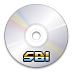
<style>
.page{position:relative;width:72px;height:72px;background:#ffffff}
.page>*{position:absolute;margin:0}
.t1{font:14px "Uranium"}
</style>
<div class="page">
<p class="t1" style="left:24px;top:52px;width:25px;height:9px">SBI</p>
</div>
